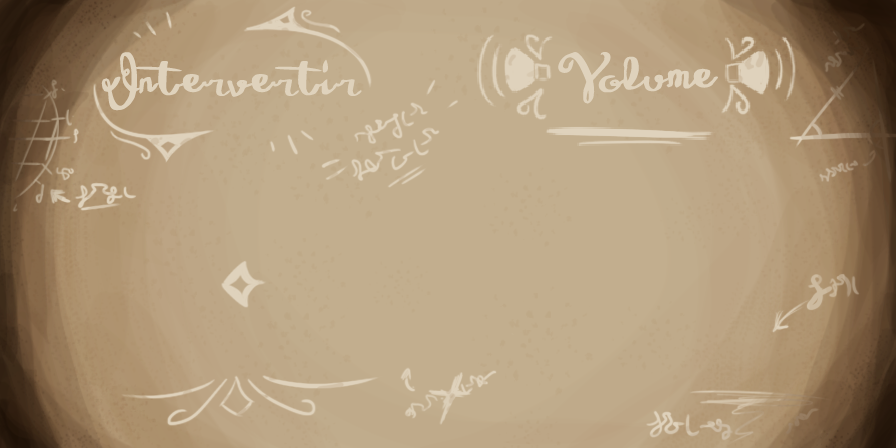
<style>
.page{position:relative;width:896px;height:448px;background:#c2ae8e}
.page>*{position:absolute;margin:0}
.t1{font:74px "WineTasting";color:#dfd2bc}
.t2{font:76.1px "WineTasting";color:#dfd2bc}
</style>
<div class="page">
<p class="t1" style="left:101px;top:52px;width:261px;height:59px">Intervertir</p>
<p class="t2" style="left:558px;top:52px;width:160px;height:52px">Volume</p>
</div>
